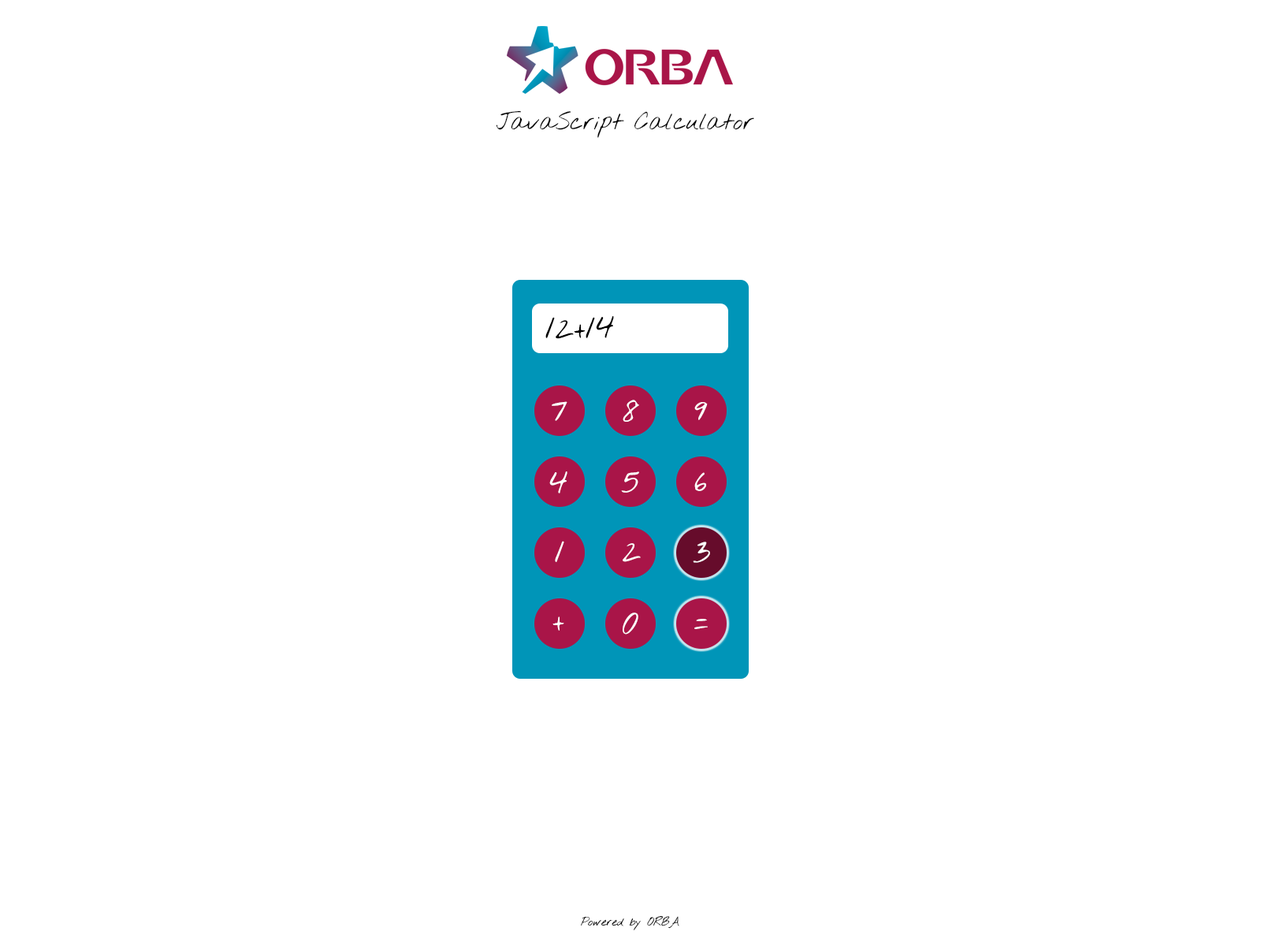
<style>
.page{position:relative;width:1261px;height:946px;background:#ffffff}
.page>*{position:absolute;margin:0}
.t1{font:18.9px "NothingYouCouldDo";color:#000000}
.t2{font:28.4px "NothingYouCouldDo";color:#000000}
.t3{font:28.4px "NothingYouCouldDo";color:#ffffff}
.t4{font:9.5px "NothingYouCouldDo";color:#000000}
</style>
<div class="page">
<p class="t1" style="left:496px;top:110px;width:258px;height:28px">JavaScript Calculator</p>
<p class="t2" style="left:545px;top:316px;width:69px;height:23px">12+14</p>
<p class="t3" style="left:552px;top:401px;width:15px;height:20px">7</p>
<p class="t3" style="left:623px;top:400px;width:16px;height:22px">8</p>
<p class="t3" style="left:694px;top:402px;width:14px;height:18px">9</p>
<p class="t3" style="left:549px;top:471px;width:18px;height:22px">4</p>
<p class="t3" style="left:621px;top:471px;width:18px;height:22px">5</p>
<p class="t3" style="left:694px;top:472px;width:12px;height:19px">6</p>
<p class="t3" style="left:555px;top:541px;width:9px;height:21px">1</p>
<p class="t3" style="left:623px;top:543px;width:18px;height:19px">2</p>
<p class="t3" style="left:693px;top:541px;width:17px;height:22px">3</p>
<p class="t3" style="left:552px;top:616px;width:12px;height:14px">+</p>
<p class="t3" style="left:623px;top:612px;width:15px;height:22px">0</p>
<p class="t3" style="left:694px;top:619px;width:14px;height:10px">=</p>
<p class="t4" style="left:581px;top:916px;width:98px;height:14px">Powered by ORBA</p>
</div>
